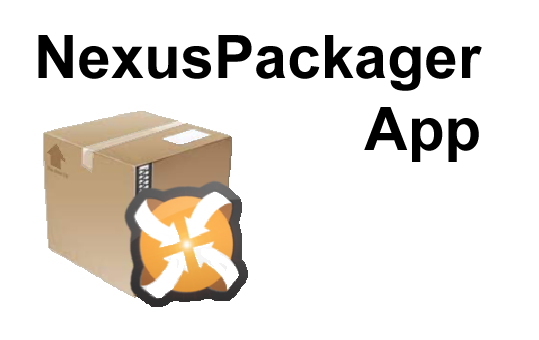
<style>
.page{position:relative;width:539px;height:340px;background:#ffffff}
.page>*{position:absolute;margin:0}
.t1{font:60px "Arial-BoldMT";color:#000000}
</style>
<div class="page">
<p class="t1" style="left:38px;top:35px;width:444px;height:127px;text-align:right">NexusPackager<br>App</p>
</div>
